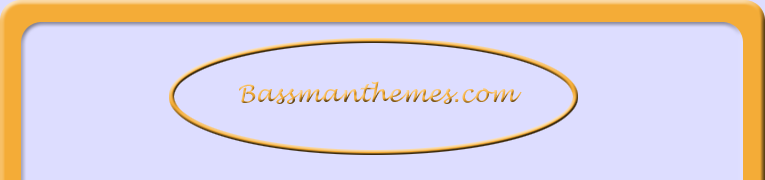
<style>
.page{position:relative;width:765px;height:180px;background:#ddddff}
.page>*{position:absolute;margin:0}
.t1{font:24px "LucidaHandwriting-Italic"}
</style>
<div class="page">
<p class="t1" style="left:239px;top:81px;width:283px;height:23px">Bassmanthemes.com</p>
</div>
